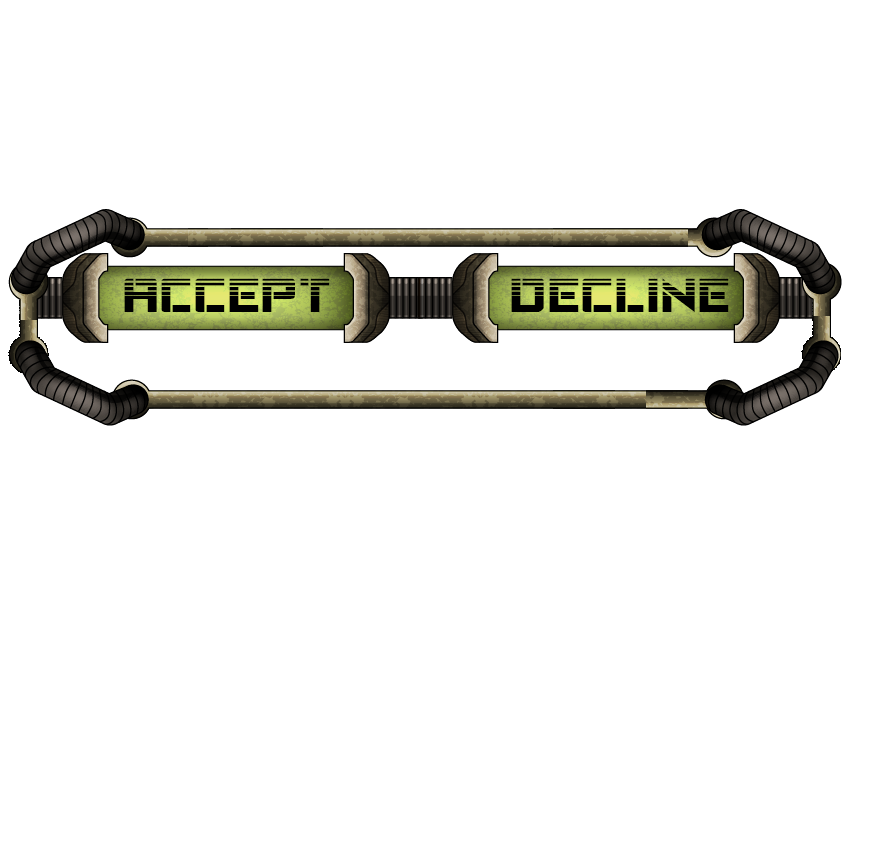
<style>
.page{position:relative;width:896px;height:847px;background:#ffffff}
.page>*{position:absolute;margin:0}
.t1{font:80px "VikingSquadHalftone";color:#000000}
</style>
<div class="page">
<p class="t1" style="left:124px;top:278px;width:206px;height:34px">Accept</p>
<p class="t1" style="left:511px;top:278px;width:218px;height:35px">Decline</p>
</div>
